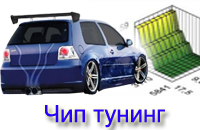
<style>
.page{position:relative;width:200px;height:130px;background:#ffffff}
.page>*{position:absolute;margin:0}
.t1{font:24px "ArialMT";color:#2501fe}
</style>
<div class="page">
<p class="t1" style="left:45px;top:105px;width:120px;height:23px">Чип тунинг</p>
</div>
